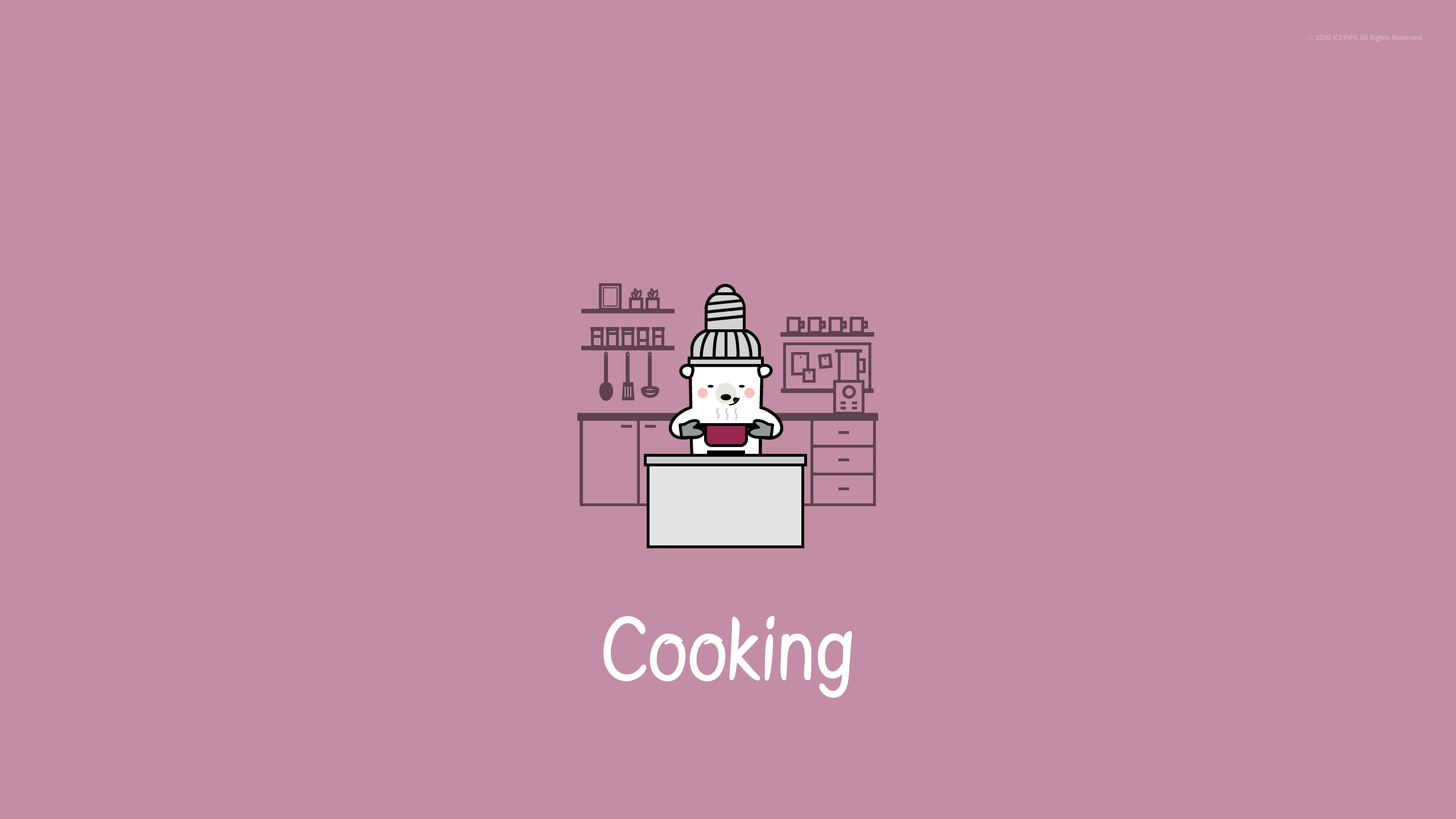
<style>
.page{position:relative;width:1456px;height:819px;background:#c28da5}
.page>*{position:absolute;margin:0}
.t1{font:87.5px "MDAlong";color:#ffffff;font-weight:bold;scale:0.81 1}
</style>
<div class="page">
<p class="t1" style="left:603px;top:615px;width:249px;height:83px">Cooking</p>
</div>
